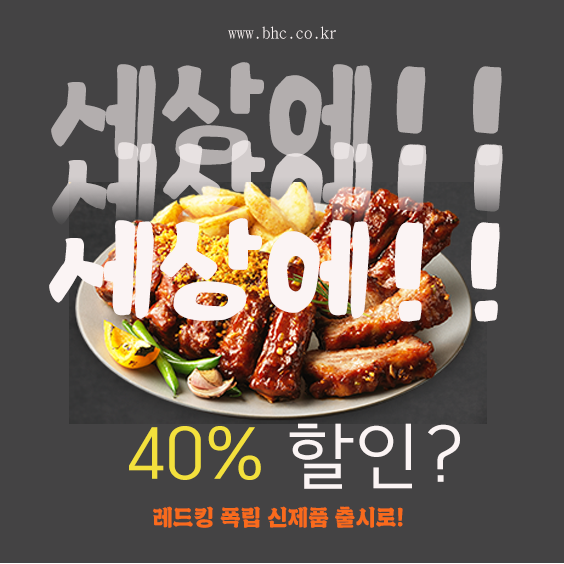
<style>
.page{position:relative;width:564px;height:564px;background:#444344}
.page>*{position:absolute;margin:0}
.t1{font:16.8px "BatangChe";color:#fbf4f4}
.t2{font:107.9px "EF_jejudoldam";color:#b3aeae}
.t3{font:107.9px "EF_jejudoldam"}
.t4{font:107.9px "EF_jejudoldam";color:#fbf4f4}
.t5{font:70.9px "HCRDotum";color:#f3e03c}
.t6{font:70.9px "HCRDotum";color:#fbf4f4}
.t7{font:22.4px "Miwon";color:#f96a1c}
</style>
<div class="page">
<p class="t1" style="left:228px;top:26px;width:108px;height:13px">www.bhc.co.kr</p>
<p class="t2" style="left:51px;top:62px;width:451px;height:104px">세상에!!</p>
<p class="t3" style="left:52px;top:140px;width:451px;height:104px">세상에!!</p>
<p class="t4" style="left:49px;top:218px;width:451px;height:104px">세상에!!</p>
<p class="t5" style="left:129px;top:423px;width:331px;height:66px">40%<span class="t6"> 할인?</span></p>
<p class="t7" style="left:153px;top:506px;width:250px;height:22px">레드킹 폭립 신제품 출시로!</p>
</div>
